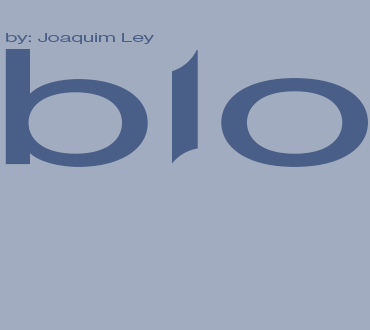
<style>
.page{position:relative;width:370px;height:330px;background:#a2acc0}
.page>*{position:absolute;margin:0}
.t1{font:12.1px "HelveticaNeue-Extended";letter-spacing:-0.025em;color:#495f88;scale:1.49 1}
.t2{font:159.2px "HelveticaNeue-Extended";letter-spacing:-0.025em;color:#495f88;scale:1.52 1}
</style>
<div class="page">
<p class="t1" style="left:6px;top:33px;width:148px;height:11px">by: Joaquim Ley</p>
<p class="t2" style="left:5px;top:49px;width:363px;height:118px">bIo</p>
</div>
